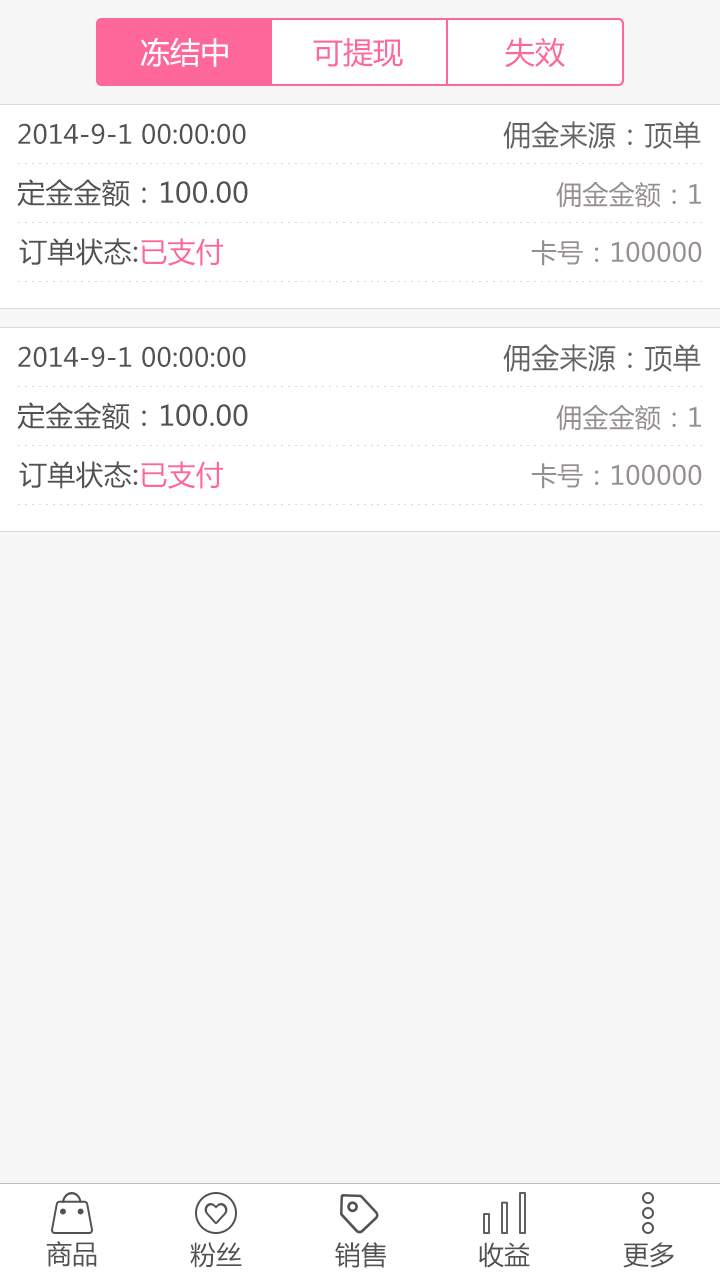
<style>
.page{position:relative;width:720px;height:1280px;background:#f7f7f7}
.page>*{position:absolute;margin:0}
.t1{font:30px "MicrosoftYaHei";color:#ffffff}
.t2{font:30px "MicrosoftYaHei";color:#fd679a}
.t3{font:26px "MicrosoftYaHei";letter-spacing:0.01em;color:#525252}
.t4{font:28px "MicrosoftYaHei";letter-spacing:0.01em;color:#636363}
.t5{font:28px "MicrosoftYaHei";letter-spacing:0.01em;color:#525252}
.t6{font:26px "MicrosoftYaHei";letter-spacing:0.01em;color:#958f93}
.t7{font:28px "MicrosoftYaHei";letter-spacing:0.01em;color:#fd679a}
.t8{font:26px "MicrosoftYaHei";color:#525252}
</style>
<div class="page">
<p class="t1" style="left:140px;top:37px;width:88px;height:30px">冻结中</p>
<p class="t2" style="left:313px;top:38px;width:90px;height:29px">可提现</p>
<p class="t2" style="left:505px;top:37px;width:60px;height:31px">失效</p>
<p class="t3" style="left:18px;top:123px;width:228px;height:21px">2014-9-1 00:00:00</p>
<p class="t4" style="left:503px;top:121px;width:198px;height:28px">佣金来源：顶单</p>
<p class="t5" style="left:17px;top:179px;width:231px;height:28px">定金金额：100.00</p>
<p class="t6" style="left:556px;top:182px;width:145px;height:26px">佣金金额：1</p>
<p class="t5" style="left:19px;top:238px;width:204px;height:28px">订单状态:<span class="t7">已支付</span></p>
<p class="t6" style="left:531px;top:240px;width:171px;height:26px">卡号：100000</p>
<p class="t3" style="left:18px;top:346px;width:228px;height:21px">2014-9-1 00:00:00</p>
<p class="t4" style="left:503px;top:344px;width:198px;height:28px">佣金来源：顶单</p>
<p class="t5" style="left:17px;top:402px;width:231px;height:28px">定金金额：100.00</p>
<p class="t6" style="left:556px;top:405px;width:145px;height:26px">佣金金额：1</p>
<p class="t5" style="left:19px;top:461px;width:204px;height:28px">订单状态:<span class="t7">已支付</span></p>
<p class="t6" style="left:531px;top:463px;width:171px;height:26px">卡号：100000</p>
<p class="t8" style="left:46px;top:1241px;width:51px;height:26px">商品</p>
<p class="t8" style="left:190px;top:1242px;width:52px;height:26px">粉丝</p>
<p class="t8" style="left:335px;top:1242px;width:51px;height:26px">销售</p>
<p class="t8" style="left:479px;top:1242px;width:51px;height:26px">收益</p>
<p class="t8" style="left:623px;top:1242px;width:51px;height:26px">更多</p>
</div>
